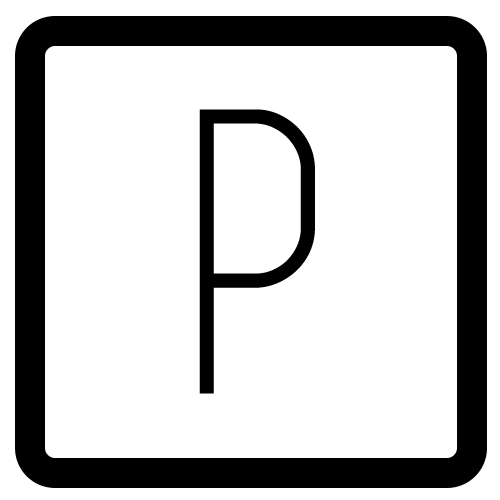
<style>
.page{position:relative;width:500px;height:500px;background:#ffffff}
.page>*{position:absolute;margin:0}
.t1{font:420px "Simplifica";color:#000000}
</style>
<div class="page">
<p class="t1" style="left:199px;top:109px;width:116px;height:285px">P</p>
</div>
